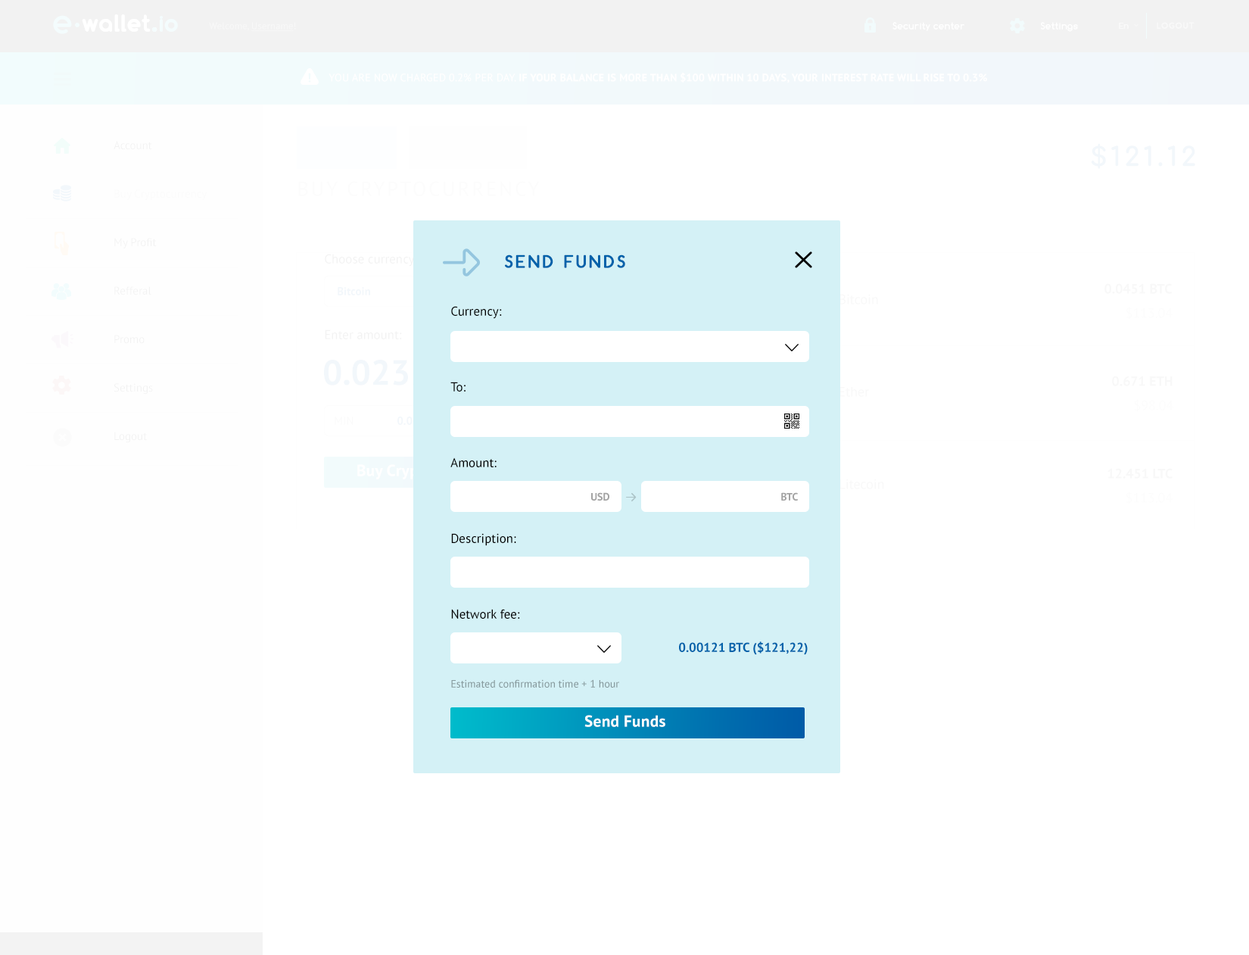
<style>
.page{position:relative;width:1249px;height:955px;background:#ffffff}
.page>*{position:absolute;margin:0}
.t1{font:12.9px/75.7px "PTSans-Regular";color:#f2f2f2}
.t2{font:17.4px "Comfortaa-Bold";letter-spacing:0.18em;color:#0062aa;text-transform:uppercase;font-weight:bold}
.t3{font:11.4px "PTSans-Bold";color:#f2f7fb}
.t4{font:12.9px/75.7px "PTSans-Regular";color:#000000}
.t5{font:10.6px "PTSans-Bold";color:#a3a3a3}
.t6{font:12.9px "PTSans-Bold";color:#0062aa}
.t7{font:10.6px "PTSans-Regular";color:#86999d}
.t8{font:15.9px "PTSans-Bold";letter-spacing:0.02em;color:#ffffff}
</style>
<div class="page">
<p class="t1" style="left:325px;top:254px;width:92px;height:85px">Choose currency:<br>Enter amount:</p>
<p class="t2" style="left:505px;top:254px;width:120px;height:14px">Send Funds</p>
<p class="t3" style="left:338px;top:287px;width:32px;height:8px">Bitcoin</p>
<p class="t4" style="left:450px;top:306px;width:70px;height:312px">Currency:<br>To:<br>Amount:<br>Description:<br>Network fee:</p>
<p class="t5" style="left:591px;top:492px;width:18px;height:8px">USD</p>
<p class="t5" style="left:781px;top:492px;width:17px;height:8px">BTC</p>
<p class="t6" style="left:679px;top:641px;width:129px;height:14px">0.00121 BTC ($121,22)</p>
<p class="t7" style="left:451px;top:679px;width:168px;height:8px">Estimated confirmation time + 1 hour</p>
<p class="t8" style="left:584px;top:715px;width:81px;height:12px">Send Funds</p>
</div>
